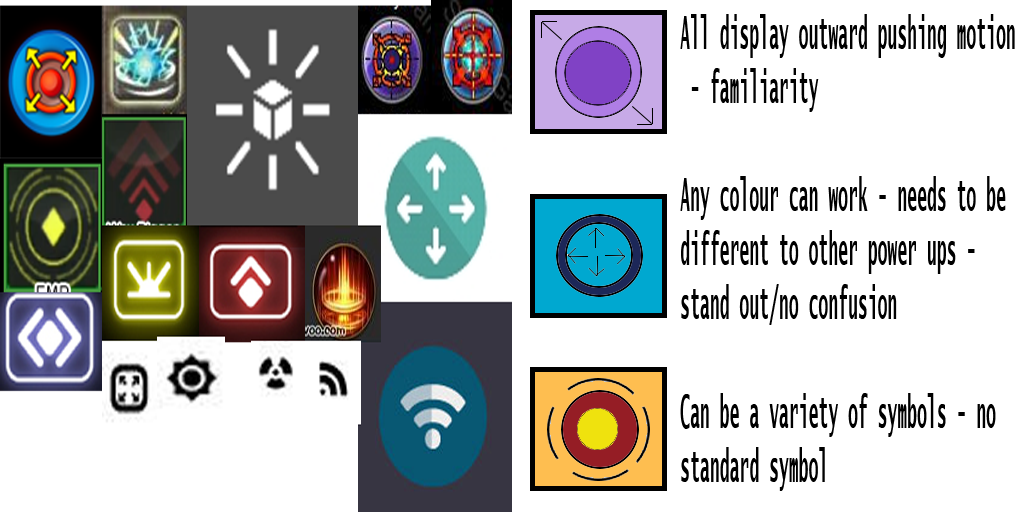
<style>
.page{position:relative;width:1024px;height:512px;background:#ffffff}
.page>*{position:absolute;margin:0}
.t1{font:45.1px "LucidaSans-TypewriterBold";color:#000000;scale:0.36 1}
</style>
<div class="page">
<p class="t1" style="left:680px;top:14px;width:335px;height:477px">All display outward pushing motion<br> - familiarity<br><br>Any colour can work - needs to be<br>different to other power ups - <br>stand out/no confusion<br><br>Can be a variety of symbols - no<br>standard symbol</p>
</div>
